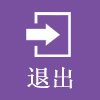
<style>
.page{position:relative;width:100px;height:100px;background:#79509f}
.page>*{position:absolute;margin:0}
.t1{font:24px "NSimSun";color:#ffffff;font-weight:bold}
</style>
<div class="page">
<p class="t1" style="left:27px;top:67px;width:46px;height:22px">退出</p>
</div>
